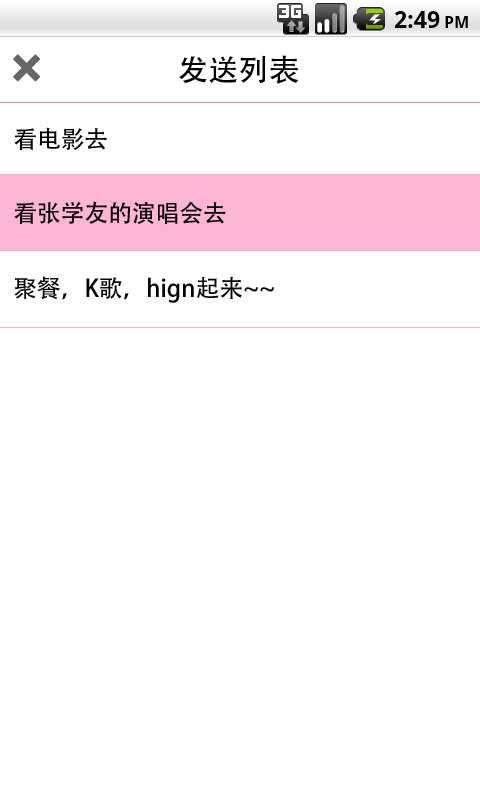
<style>
.page{position:relative;width:480px;height:800px;background:#ffffff}
.page>*{position:absolute;margin:0}
.t1{font:30px "AdobeHeitiStd-Regular";color:#000000}
.t2{font:24px "AdobeHeitiStd-Regular";color:#040404}
</style>
<div class="page">
<p class="t1" style="left:179px;top:55px;width:120px;height:29px">发送列表</p>
<p class="t2" style="left:14px;top:127px;width:93px;height:24px">看电影去</p>
<p class="t2" style="left:14px;top:201px;width:212px;height:24px">看张学友的演唱会去</p>
<p class="t2" style="left:14px;top:276px;width:260px;height:27px">聚餐，K歌，hign起来~~</p>
</div>
